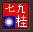
<style>
.page{position:relative;width:33px;height:32px;background:#f20000}
.page>*{position:absolute;margin:0}
.t1{font:10.4px "SimSun";color:#ffffff}
.t2{font:11.7px "SimSun";color:#ffffff}
</style>
<div class="page">
<p class="t1" style="left:5px;top:4px;width:20px;height:9px">七九</p>
<p class="t2" style="left:16px;top:15px;width:11px;height:12px">桂</p>
</div>
